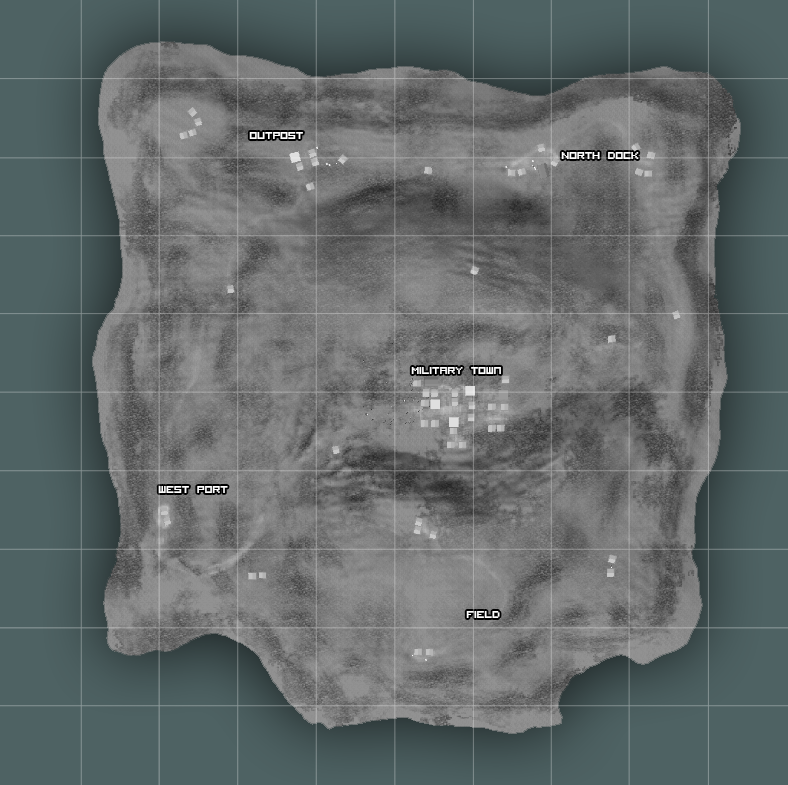
<style>
.page{position:relative;width:788px;height:785px}
.page>*{position:absolute;margin:0}
.t1{font:13.7px "VisitorTT1BRK";color:#ffffff;scale:0.94 1}
</style>
<div class="page">
<p class="t1" style="left:249px;top:132px;width:54px;height:7px">Outpost</p>
<p class="t1" style="left:561px;top:152px;width:78px;height:7px">North dock</p>
<p class="t1" style="left:411px;top:367px;width:90px;height:7px">Military town</p>
<p class="t1" style="left:158px;top:486px;width:70px;height:7px">west port</p>
<p class="t1" style="left:466px;top:611px;width:34px;height:7px">field</p>
</div>
